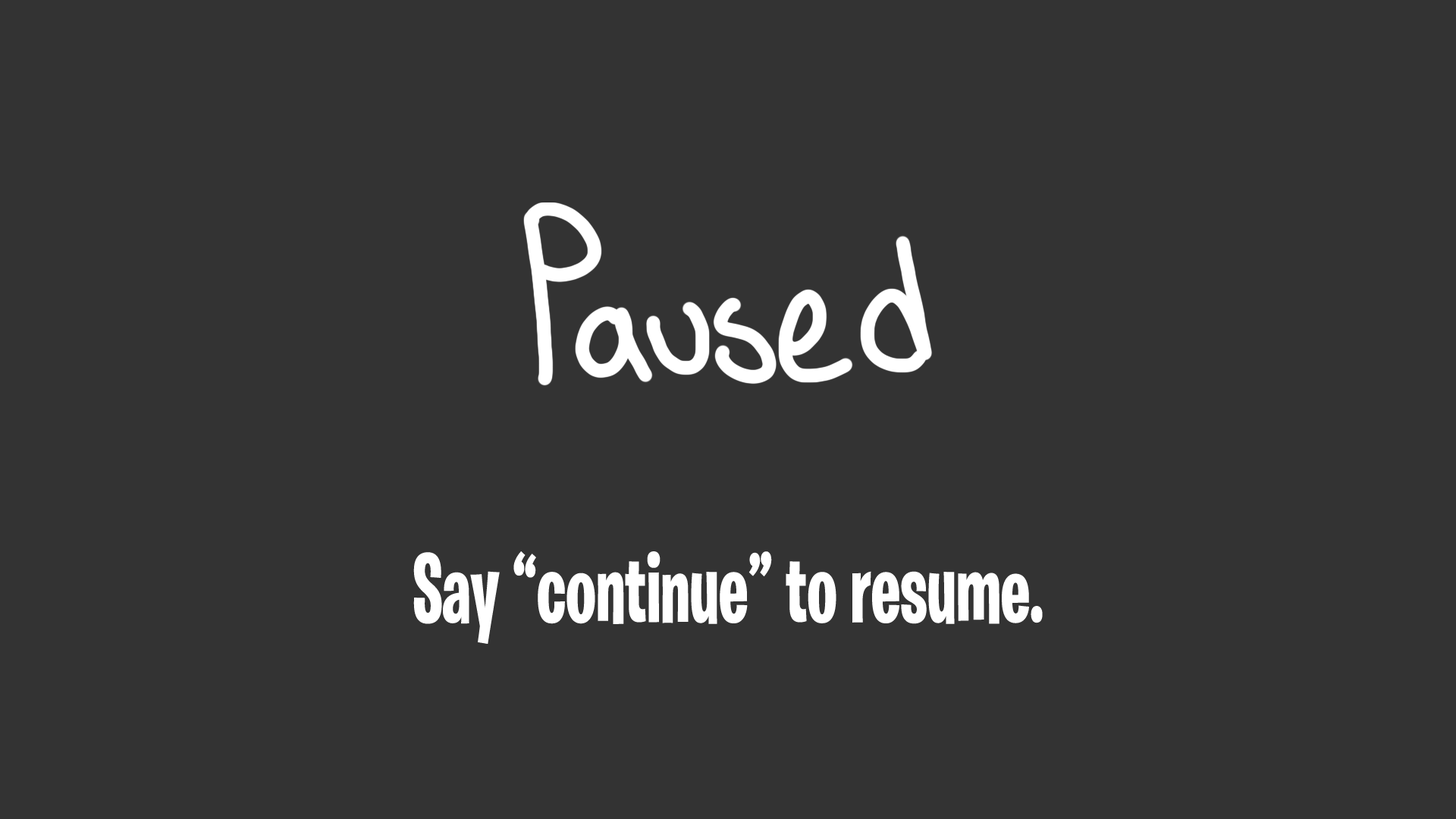
<style>
.page{position:relative;width:1456px;height:819px;background:#333333}
.page>*{position:absolute;margin:0}
.t1{font:98.6px "BurbankBigCondensed-Bold";color:#ffffff;scale:0.77 1}
</style>
<div class="page">
<p class="t1" style="left:413px;top:551px;width:630px;height:93px">Say “continue” to resume.</p>
</div>
